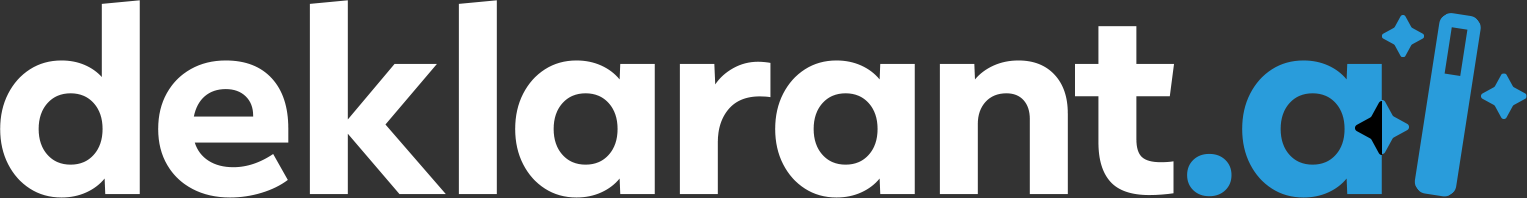
<style>
.page{position:relative;width:1527px;height:198px;background:#333333}
.page>*{position:absolute;margin:0}
.t1{font:256.1px "FacebookSans-Bold";letter-spacing:-0.025em;color:#ffffff}
.t2{font:256.1px "FacebookSans-Bold";letter-spacing:-0.025em;color:#299cdb}
</style>
<div class="page">
<p class="t1" style="left:0px;top:0px;width:1382px;height:198px">deklarant<span class="t2">.a</span></p>
</div>
